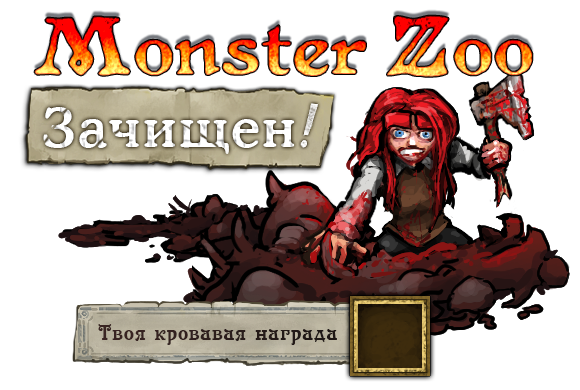
<style>
.page{position:relative;width:580px;height:390px;background:#ffffff}
.page>*{position:absolute;margin:0}
.t1{font:54.3px "CooperMediumCBT";letter-spacing:0.04em;color:#ffffff}
.t2{font:21.5px "Casanova";letter-spacing:0.04em;color:#3b2624}
</style>
<div class="page">
<p class="t1" style="left:43px;top:107px;width:252px;height:47px">Зачищен</p>
<p class="t2" style="left:98px;top:324px;width:239px;height:21px">Твоя кровавая награда</p>
</div>
